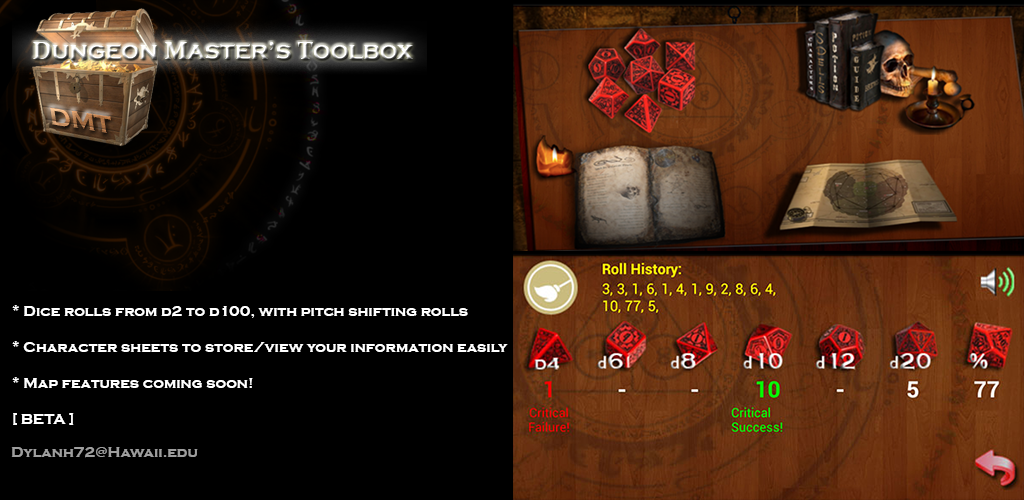
<style>
.page{position:relative;width:1024px;height:500px;background:#000000}
.page>*{position:absolute;margin:0}
.t1{font:25px "CopperplateGothic-Bold"}
.t2{font:25px "Constantia-Bold"}
.t3{font:25.8px "CopperplateGothic-Bold"}
.t4{font:15px "CopperplateGothic-Bold";color:#ffffff}
.t5{font:15px "CopperplateGothic-Bold";color:#9e9e9e}
</style>
<div class="page">
<p class="t1" style="left:33px;top:42px;width:380px;height:18px"><span class="t2">D</span>ungeon <span class="t2">M</span>aster’s <span class="t2">T</span>oolbox</p>
<p class="t3" style="left:49px;top:107px;width:62px;height:26px;rotate:10deg">DMT</p>
<p class="t4" style="left:12px;top:305px;width:496px;height:120px">* Dice rolls from d2 to d100, with pitch shifting rolls<br><br>* Character sheets to store/view your information easily<br><br>* Map features coming soon!<br><br>[ BETA ]</p>
<p class="t5" style="left:11px;top:447px;width:187px;height:11px">Dylanh72@Hawaii.edu</p>
</div>
